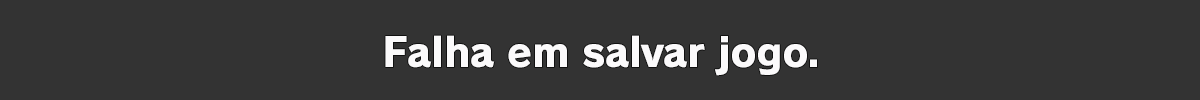
<style>
.page{position:relative;width:1200px;height:100px;background:#333333}
.page>*{position:absolute;margin:0}
.t1{font:40px "RodinPro-EB";letter-spacing:-0.013em;color:#fbfafb}
</style>
<div class="page">
<p class="t1" style="left:385px;top:35px;width:432px;height:41px">Falha em salvar jogo.</p>
</div>
